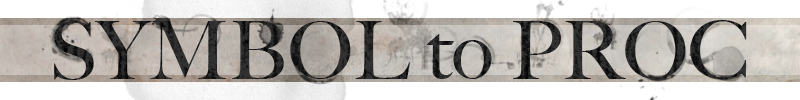
<style>
.page{position:relative;width:800px;height:100px;background:#ffffff}
.page>*{position:absolute;margin:0}
.t1{font:80px "BigCaslon-Medium";color:#262626}
</style>
<div class="page">
<p class="t1" style="left:54px;top:20px;width:693px;height:60px">SYMBOL to PROC</p>
</div>
